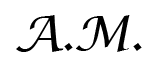
<style>
.page{position:relative;width:162px;height:77px;background:#ffffff}
.page>*{position:absolute;margin:0}
.t1{font:48px "LucidaCalligraphy-Italic";color:#000000}
</style>
<div class="page">
<p class="t1" style="left:16px;top:15px;width:126px;height:37px">A.M.</p>
</div>
